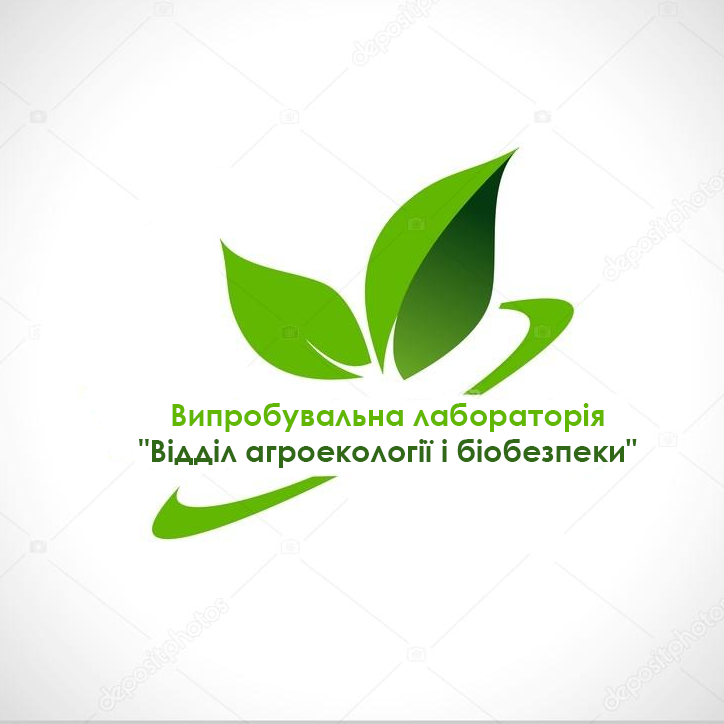
<style>
.page{position:relative;width:724px;height:724px;background:#ffffff}
.page>*{position:absolute;margin:0}
.t1{font:30px "CenturyGothic-Bold";color:#316817}
.t2{font:30px "CenturyGothic-Bold";color:#62b702}
</style>
<div class="page">
<p class="t1" style="left:139px;top:403px;width:498px;height:65px;text-align:center"><span class="t2">Випробувальна лабораторія<br></span>"Відділ агроекології і біобезпеки"</p>
</div>
